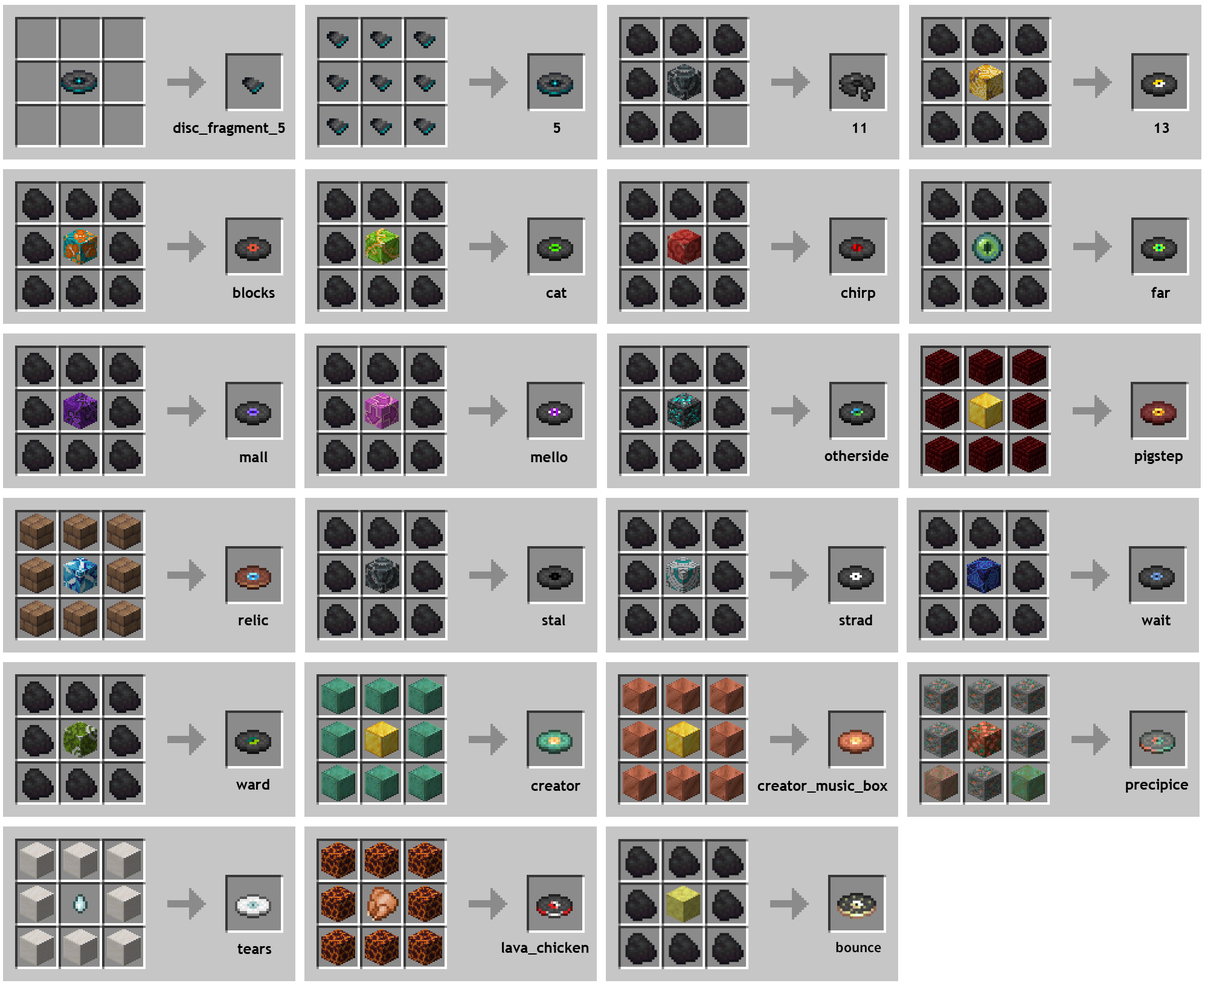
<style>
.page{position:relative;width:1205px;height:989px;background:#c6c6c6}
.page>*{position:absolute;margin:0}
.t1{font:14.5px "TrebuchetMS-Bold";color:#000000}
</style>
<div class="page">
<p class="t1" style="left:173px;top:122px;width:112px;height:14px">disc_fragment_5</p>
<p class="t1" style="left:554px;top:123px;width:7px;height:10px">5</p>
<p class="t1" style="left:853px;top:123px;width:13px;height:10px">11</p>
<p class="t1" style="left:1155px;top:123px;width:15px;height:10px">13</p>
<p class="t1" style="left:233px;top:287px;width:42px;height:11px">blocks</p>
<p class="t1" style="left:546px;top:288px;width:21px;height:10px">cat</p>
<p class="t1" style="left:841px;top:287px;width:35px;height:14px">chirp</p>
<p class="t1" style="left:1152px;top:287px;width:19px;height:11px">far</p>
<p class="t1" style="left:240px;top:451px;width:28px;height:11px">mall</p>
<p class="t1" style="left:531px;top:451px;width:37px;height:11px">mellohi</p>
<p class="t1" style="left:825px;top:450px;width:64px;height:11px">otherside</p>
<p class="t1" style="left:1135px;top:450px;width:48px;height:14px">pigstep</p>
<p class="t1" style="left:239px;top:615px;width:29px;height:10px">relic</p>
<p class="t1" style="left:542px;top:615px;width:24px;height:10px">stal</p>
<p class="t1" style="left:839px;top:615px;width:34px;height:10px">strad</p>
<p class="t1" style="left:1142px;top:615px;width:29px;height:10px">wait</p>
<p class="t1" style="left:236px;top:779px;width:33px;height:11px">ward</p>
<p class="t1" style="left:531px;top:781px;width:50px;height:10px">creator</p>
<p class="t1" style="left:758px;top:780px;width:130px;height:13px">creator_music_box</p>
<p class="t1" style="left:1126px;top:779px;width:63px;height:14px">precipice</p>
<p class="t1" style="left:237px;top:944px;width:35px;height:10px">tears</p>
<p class="t1" style="left:502px;top:942px;width:87px;height:13px">lava_chicken</p>
<p class="t1" style="left:836px;top:942px;width:46px;height:11px">bounce</p>
</div>
